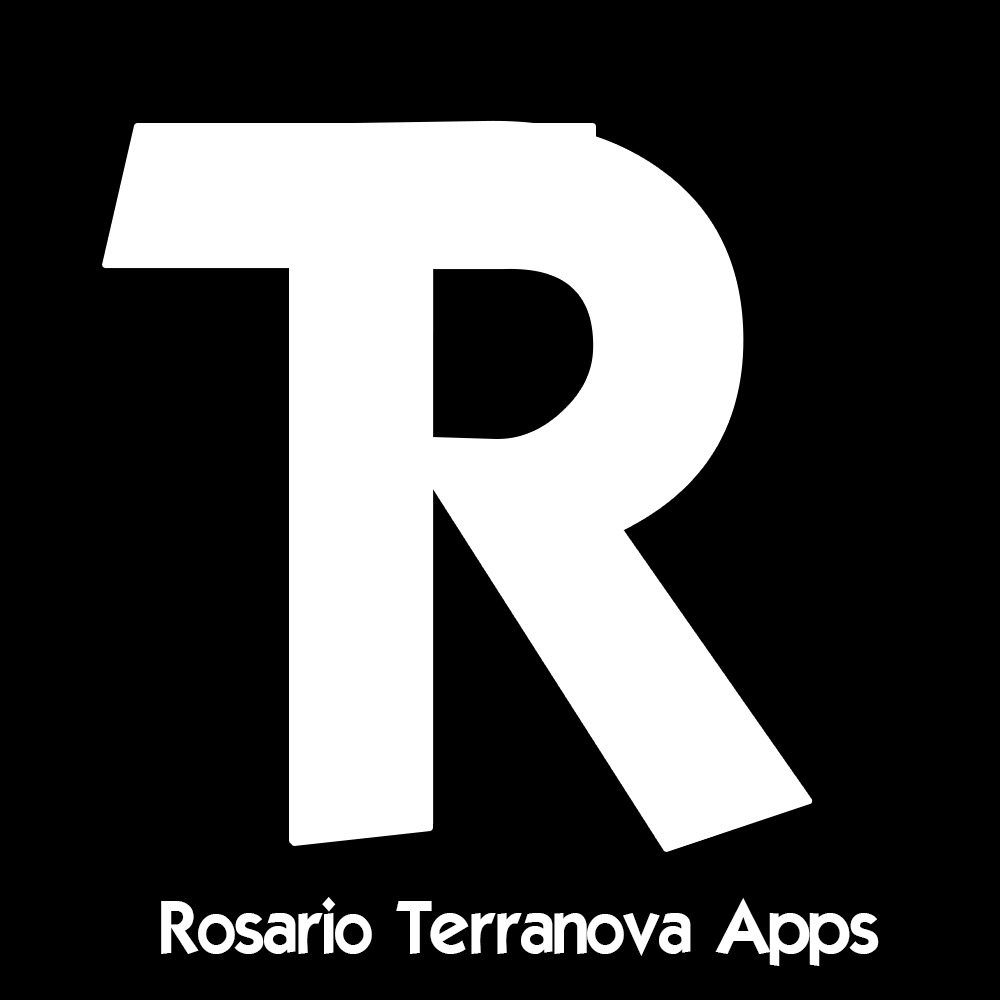
<style>
.page{position:relative;width:1000px;height:1000px;background:#000000}
.page>*{position:absolute;margin:0}
.t1{font:1000px "ELEGANCE";color:#ffffff}
.t2{font:72px "ELEGANCE";color:#ffffff}
</style>
<div class="page">
<p class="t1" style="left:105px;top:126px;width:488px;height:717px">T</p>
<p class="t1" style="left:292px;top:123px;width:518px;height:726px">R</p>
<p class="t2" style="left:161px;top:897px;width:718px;height:69px">Rosario Terranova Apps</p>
</div>
